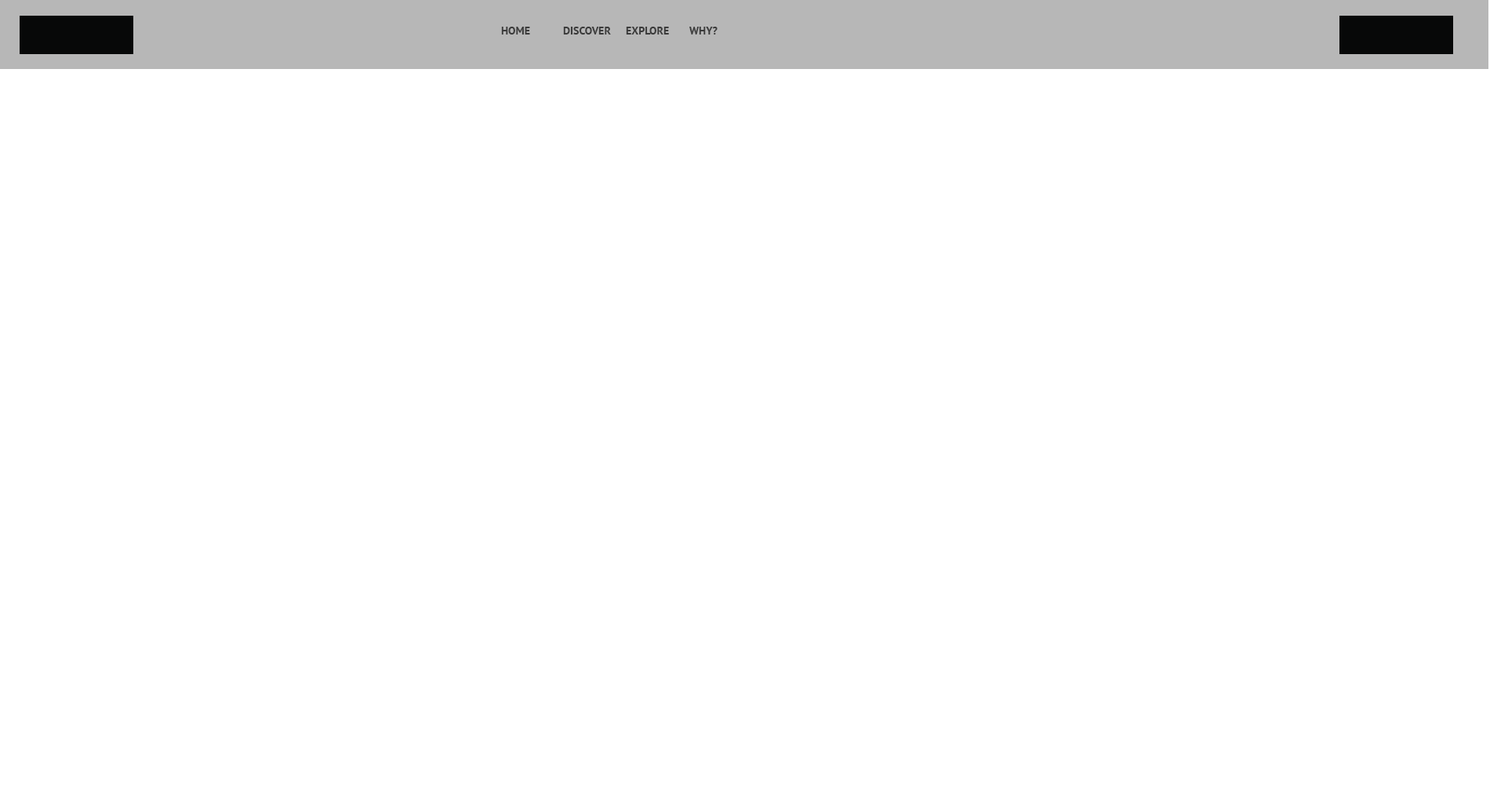
<style>
.page{position:relative;width:1490px;height:800px;background:#ffffff}
.page>*{position:absolute;margin:0}
.t1{font:11px "PTSans-Bold";color:#3b3b3b}
</style>
<div class="page">
<p class="t1" style="left:501px;top:27px;width:29px;height:8px">HOME</p>
<p class="t1" style="left:563px;top:27px;width:48px;height:8px">DISCOVER</p>
<p class="t1" style="left:626px;top:27px;width:43px;height:8px">EXPLORE</p>
<p class="t1" style="left:689px;top:27px;width:29px;height:8px">WHY?</p>
</div>
